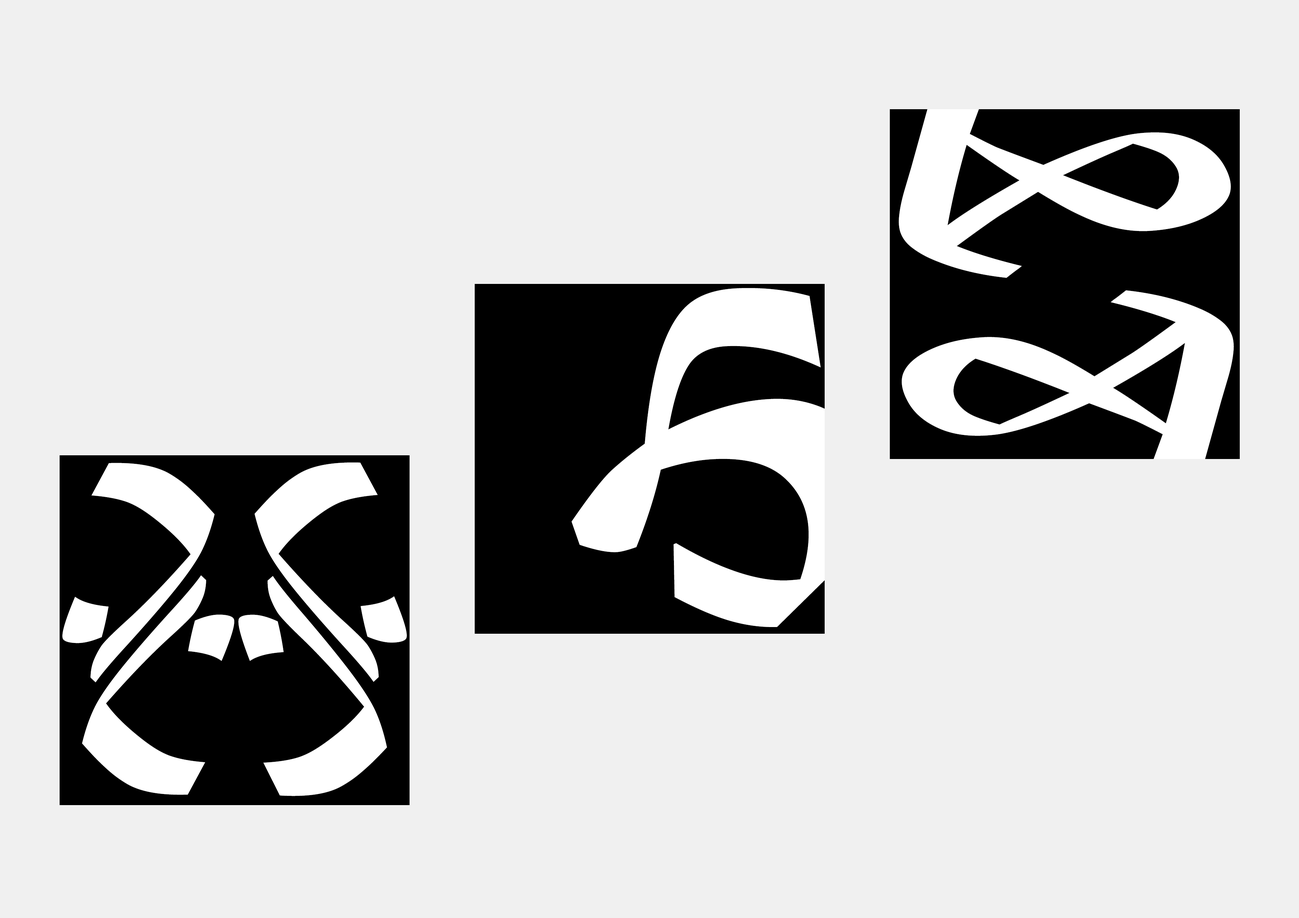
<style>
.page{position:relative;width:1299px;height:918px;background:#f0f0f0}
.page>*{position:absolute;margin:0}
.t1{font:246.8px "MaturaMTScriptCapitals";color:#ffffff}
.t2{font:375.2px "MaturaMTScriptCapitals";color:#ffffff}
.t3{font:213.6px "MaturaMTScriptCapitals";color:#ffffff}
</style>
<div class="page">
<p class="t1" style="left:899px;top:60px;width:332px;height:218px;rotate:-156deg">A</p>
<p class="t2" style="left:571px;top:288px;width:287px;height:339px;rotate:-2deg">H</p>
<p class="t1" style="left:901px;top:290px;width:333px;height:218px;rotate:24deg">A</p>
<p class="t3" style="left:62px;top:463px;width:153px;height:220px;rotate:62deg">I</p>
<p class="t3" style="left:254px;top:462px;width:153px;height:220px;rotate:118deg">I</p>
<p class="t3" style="left:82px;top:575px;width:152px;height:220px;rotate:-118deg">I</p>
<p class="t3" style="left:238px;top:576px;width:149px;height:220px;rotate:-60deg">I</p>
</div>
